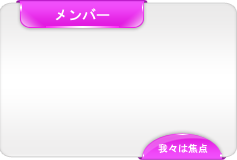
<style>
.page{position:relative;width:237px;height:160px}
.page>*{position:absolute;margin:0}
.t1{font:14px "MS-Gothic";color:#ffffff;text-transform:uppercase}
.t2{font:10px "MS-Gothic";color:#ffffff;text-transform:uppercase}
</style>
<div class="page">
<p class="t1" style="left:55px;top:8px;width:55px;height:13px">メンバー</p>
<p class="t2" style="left:158px;top:143px;width:50px;height:10px">我々は焦点</p>
</div>
